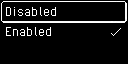
<style>
.page{position:relative;width:128px;height:64px;background:#000000}
.page>*{position:absolute;margin:0}
.t1{font:16px "PixelOperator";color:#ffffff}
</style>
<div class="page">
<p class="t1" style="left:6px;top:7px;width:51px;height:9px">Disabled</p>
<p class="t1" style="left:5px;top:27px;width:46px;height:9px">Enabled</p>
</div>
